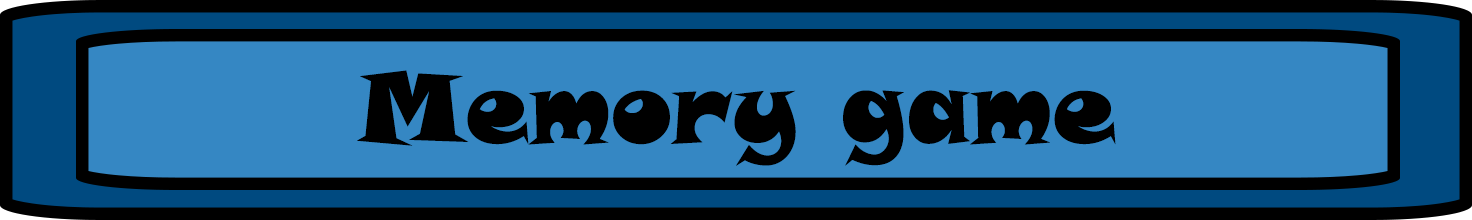
<style>
.page{position:relative;width:1472px;height:220px;background:#3587c3}
.page>*{position:absolute;margin:0}
.t1{font:100px "SnapITC-Regular";color:#000000}
</style>
<div class="page">
<p class="t1" style="left:357px;top:70px;width:759px;height:96px">Memory game</p>
</div>
